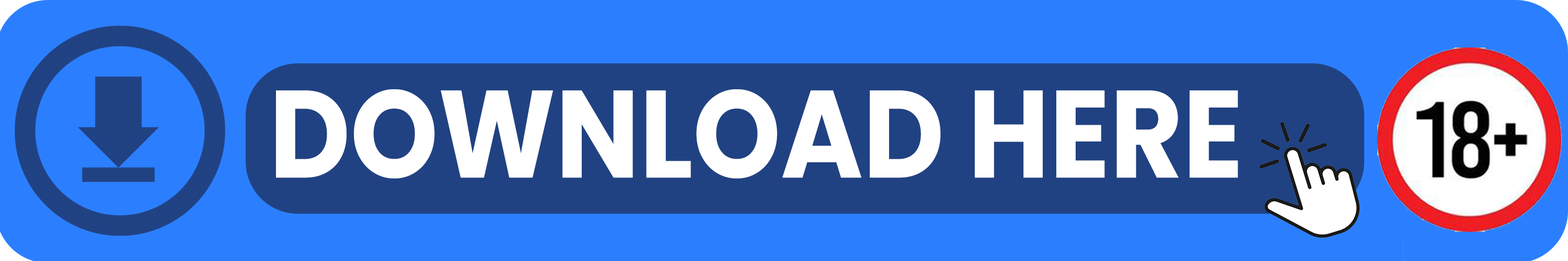
<style>
.page{position:relative;width:1568px;height:261px;background:#2b7fff}
.page>*{position:absolute;margin:0}
.t1{font:124.1px "Poppins-Bold";color:#ffffff;scale:0.9 1}
</style>
<div class="page">
<p class="t1" style="left:276px;top:89px;width:962px;height:90px">DOWNLOAD HERE</p>
</div>
